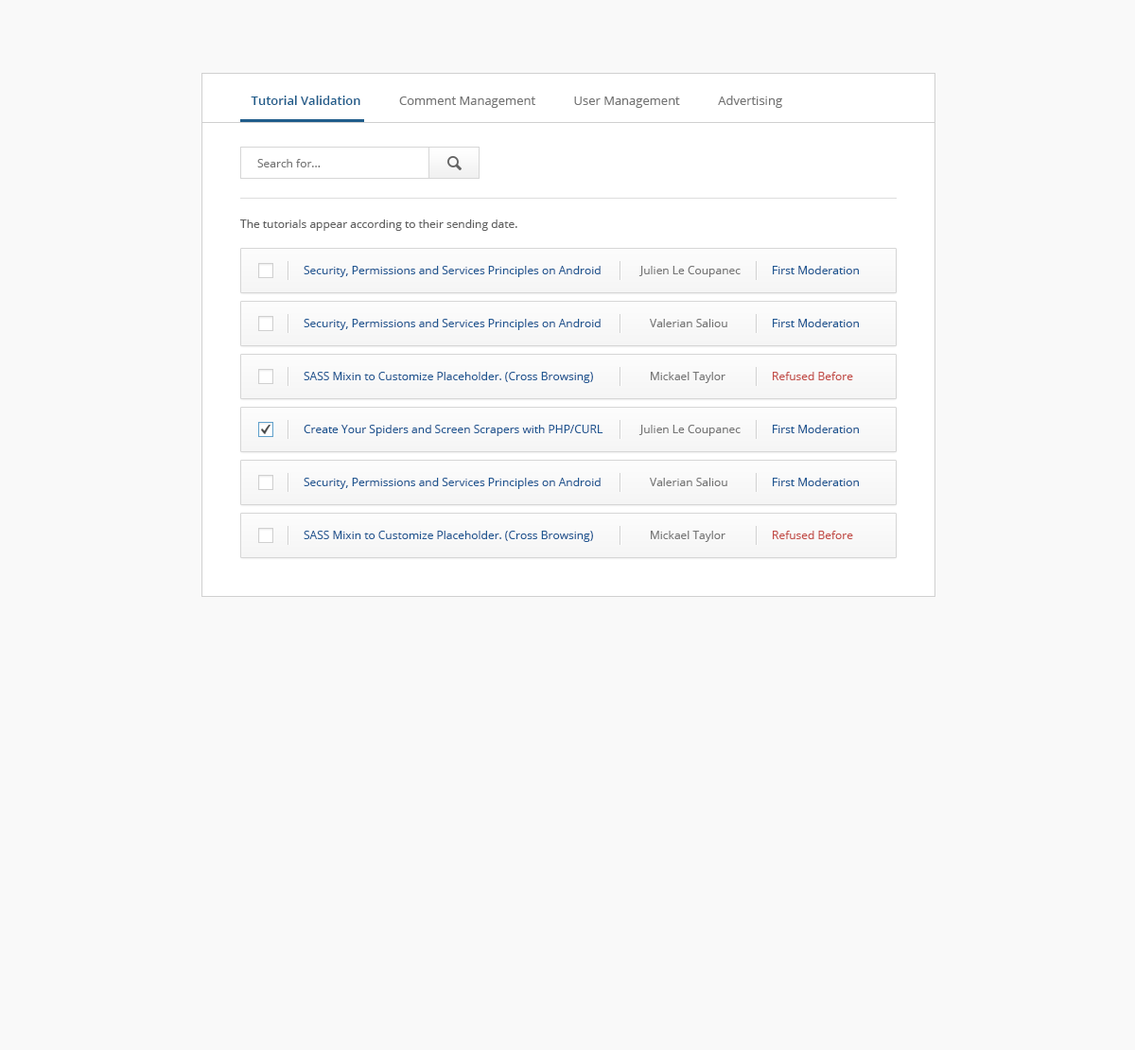
<style>
.page{position:relative;width:1135px;height:1050px;background:#f9f9f9}
.page>*{position:absolute;margin:0}
.t1{font:12.3px "OpenSans";color:#737373}
.t2{font:12.3px "OpenSans-Semibold";color:#205d8b}
.t3{font:11.4px "OpenSans";color:#757575}
.t4{font:11.4px "OpenSans";color:#606060}
.t5{font:11.4px "OpenSans";color:#1f5691}
.t6{font:11.4px "OpenSans";color:#c34c47}
</style>
<div class="page">
<p class="t1" style="left:251px;top:96px;width:531px;height:12px"><span class="t2">Tutorial Validation            </span>Comment Management            User Management            Advertising</p>
<p class="t3" style="left:257px;top:159px;width:64px;height:8px">Search for...</p>
<p class="t4" style="left:240px;top:220px;width:278px;height:11px">The tutorials appear according to their sending date.</p>
<p class="t5" style="left:304px;top:266px;width:297px;height:11px">Security, Permissions and Services Principles on Android</p>
<p class="t3" style="left:639px;top:266px;width:102px;height:11px">Julien Le Coupanec</p>
<p class="t5" style="left:773px;top:266px;width:86px;height:8px">First Moderation</p>
<p class="t5" style="left:304px;top:319px;width:297px;height:11px">Security, Permissions and Services Principles on Android</p>
<p class="t3" style="left:650px;top:319px;width:78px;height:8px">Valerian Saliou</p>
<p class="t5" style="left:773px;top:319px;width:86px;height:8px">First Moderation</p>
<p class="t5" style="left:304px;top:372px;width:289px;height:11px">SASS Mixin to Customize Placeholder. (Cross Browsing)</p>
<p class="t3" style="left:651px;top:372px;width:75px;height:11px">Mickael Taylor</p>
<p class="t6" style="left:773px;top:372px;width:80px;height:8px">Refused Before</p>
<p class="t5" style="left:304px;top:425px;width:300px;height:11px">Create Your Spiders and Screen Scrapers with PHP/CURL</p>
<p class="t3" style="left:639px;top:425px;width:102px;height:11px">Julien Le Coupanec</p>
<p class="t5" style="left:773px;top:425px;width:86px;height:8px">First Moderation</p>
<p class="t5" style="left:304px;top:478px;width:297px;height:11px">Security, Permissions and Services Principles on Android</p>
<p class="t3" style="left:650px;top:478px;width:78px;height:8px">Valerian Saliou</p>
<p class="t5" style="left:773px;top:478px;width:86px;height:8px">First Moderation</p>
<p class="t5" style="left:304px;top:531px;width:289px;height:11px">SASS Mixin to Customize Placeholder. (Cross Browsing)</p>
<p class="t3" style="left:651px;top:531px;width:75px;height:11px">Mickael Taylor</p>
<p class="t6" style="left:773px;top:531px;width:80px;height:8px">Refused Before</p>
</div>
